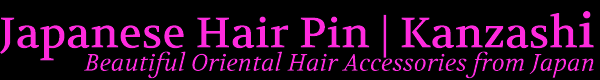
<style>
.page{position:relative;width:600px;height:80px;background:#000000}
.page>*{position:absolute;margin:0}
.t1{font:43px "Volkhov-Regular";color:#ff2add}
.t2{font:50px "Volkhov-Regular";color:#ff2add}
.t3{font:24px "Volkhov-Italic";color:#ff2add}
</style>
<div class="page">
<p class="t1" style="left:0px;top:11px;width:594px;height:50px">Japanese Hair Pin | Kanzash<span class="t2">i</span></p>
<p class="t3" style="left:84px;top:51px;width:510px;height:28px">Beautiful Oriental Hair Accessories from Japan</p>
</div>
